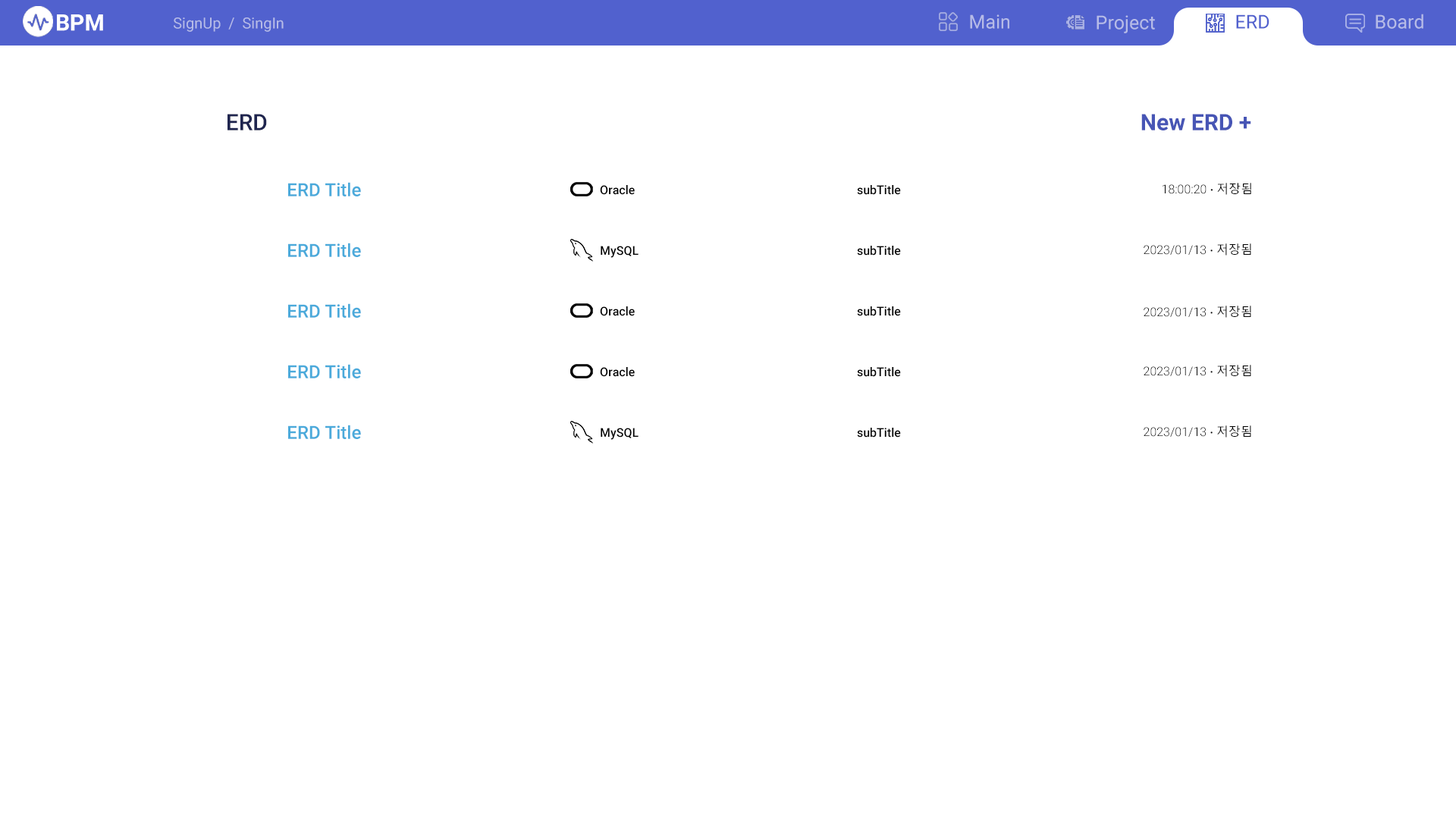
<style>
.page{position:relative;width:1456px;height:819px;background:#ffffff}
.page>*{position:absolute;margin:0}
.t1{font:22.7px "Roboto-Bold";color:#ffffff}
.t2{font:15.2px "Roboto-Regular";color:#b6bbe7}
.t3{font:19px "Roboto-Regular";color:#b6bbe7}
.t4{font:19px "Roboto-Regular";color:#5161ce}
.t5{font:22.7px "Roboto-Medium";color:#1f254f}
.t6{font:22.7px "Roboto-Bold";color:#4755b5}
.t7{font:18.2px "Roboto-Medium";color:#4baadb}
.t8{font:12.1px "Roboto-Medium";color:#000000}
.t9{font:12.1px "Roboto-Light";color:#000000}
.t10{font:12.1px "MalgunGothic";color:#000000}
</style>
<div class="page">
<p class="t1" style="left:57px;top:14px;width:46px;height:17px">BPM</p>
<p class="t2" style="left:174px;top:17px;width:110px;height:15px">SignUp  /  SingIn</p>
<p class="t3" style="left:970px;top:14px;width:39px;height:15px">Main</p>
<p class="t3" style="left:1097px;top:15px;width:58px;height:18px">Project</p>
<p class="t4" style="left:1236px;top:14px;width:33px;height:15px">ERD</p>
<p class="t3" style="left:1376px;top:14px;width:47px;height:15px">Board</p>
<p class="t5" style="left:227px;top:114px;width:40px;height:16px">ERD</p>
<p class="t6" style="left:1141px;top:114px;width:110px;height:16px">New ERD +</p>
<p class="t7" style="left:288px;top:182px;width:73px;height:14px">ERD Title</p>
<p class="t8" style="left:600px;top:185px;width:35px;height:10px">Oracle</p>
<p class="t8" style="left:857px;top:185px;width:44px;height:10px">subTitle</p>
<p class="t9" style="left:1163px;top:183px;width:88px;height:12px">18:00:20 <span class="t10">∙ 저장됨</span></p>
<p class="t7" style="left:288px;top:243px;width:73px;height:14px">ERD Title</p>
<p class="t8" style="left:601px;top:246px;width:38px;height:12px">MySQL</p>
<p class="t8" style="left:857px;top:246px;width:44px;height:10px">subTitle</p>
<p class="t9" style="left:1144px;top:243px;width:107px;height:13px">2023/01/13 <span class="t10">∙ 저장됨</span></p>
<p class="t7" style="left:288px;top:303px;width:73px;height:15px">ERD Title</p>
<p class="t9" style="left:1144px;top:306px;width:107px;height:12px">2023/01/13 <span class="t10">∙ 저장됨</span></p>
<p class="t8" style="left:600px;top:306px;width:35px;height:10px">Oracle</p>
<p class="t8" style="left:857px;top:306px;width:44px;height:10px">subTitle</p>
<p class="t7" style="left:288px;top:364px;width:73px;height:14px">ERD Title</p>
<p class="t9" style="left:1144px;top:365px;width:107px;height:12px">2023/01/13 <span class="t10">∙ 저장됨</span></p>
<p class="t8" style="left:600px;top:367px;width:35px;height:10px">Oracle</p>
<p class="t8" style="left:857px;top:367px;width:44px;height:10px">subTitle</p>
<p class="t7" style="left:288px;top:425px;width:73px;height:14px">ERD Title</p>
<p class="t9" style="left:1144px;top:425px;width:107px;height:13px">2023/01/13 <span class="t10">∙ 저장됨</span></p>
<p class="t8" style="left:601px;top:428px;width:38px;height:12px">MySQL</p>
<p class="t8" style="left:857px;top:428px;width:44px;height:10px">subTitle</p>
</div>
